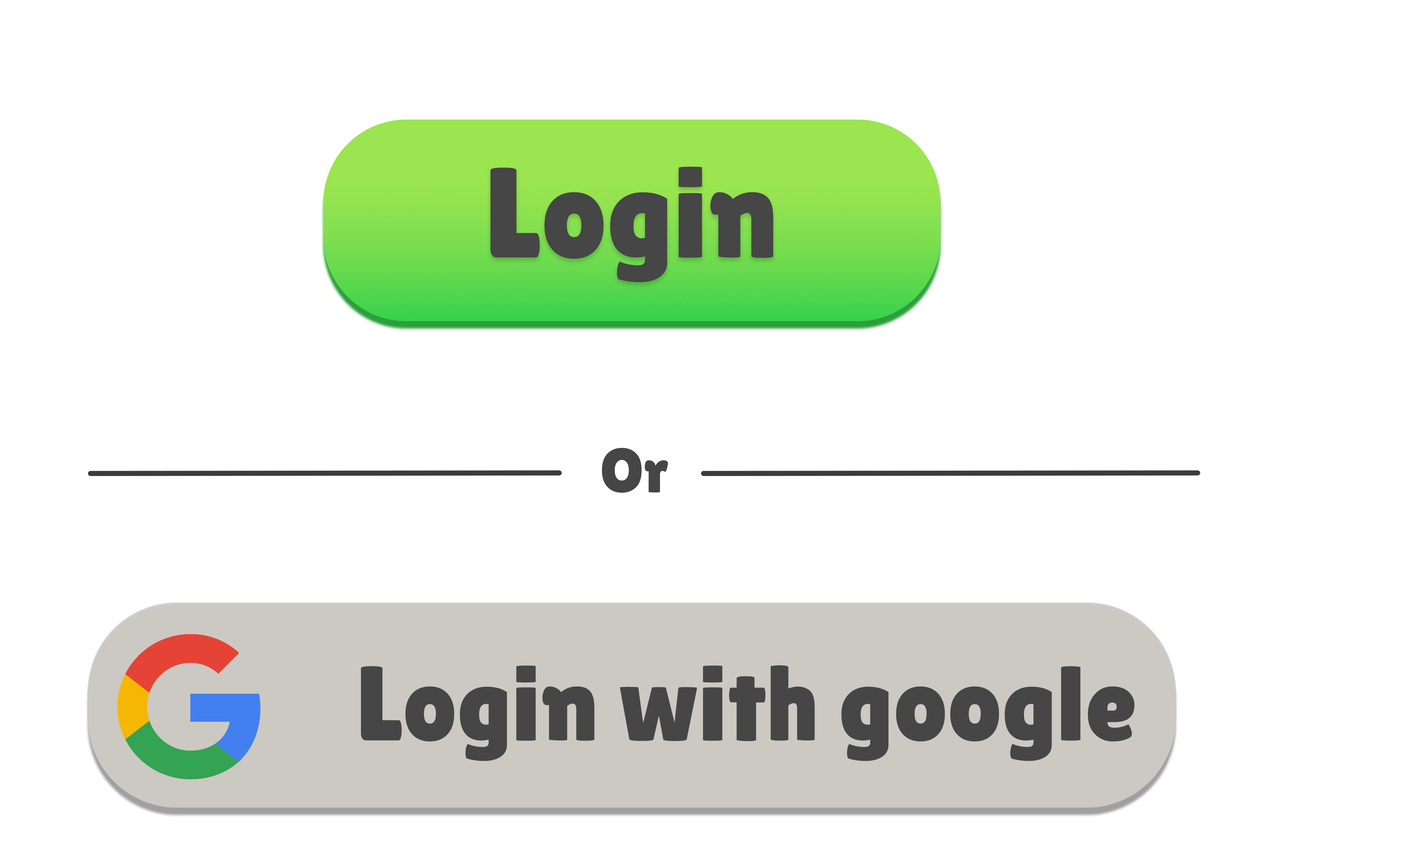
<style>
.page{position:relative;width:1410px;height:846px;background:#ffffff}
.page>*{position:absolute;margin:0}
.t1{font:128.1px "LilitaOne";color:#464646}
.t2{font:62.3px "LilitaOne";color:#464646}
.t3{font:105.7px "LilitaOne";color:#464646}
</style>
<div class="page">
<p class="t1" style="left:490px;top:167px;width:283px;height:115px">Login</p>
<p class="t2" style="left:602px;top:448px;width:66px;height:45px">Or</p>
<p class="t3" style="left:361px;top:665px;width:773px;height:96px">Login with google</p>
</div>
